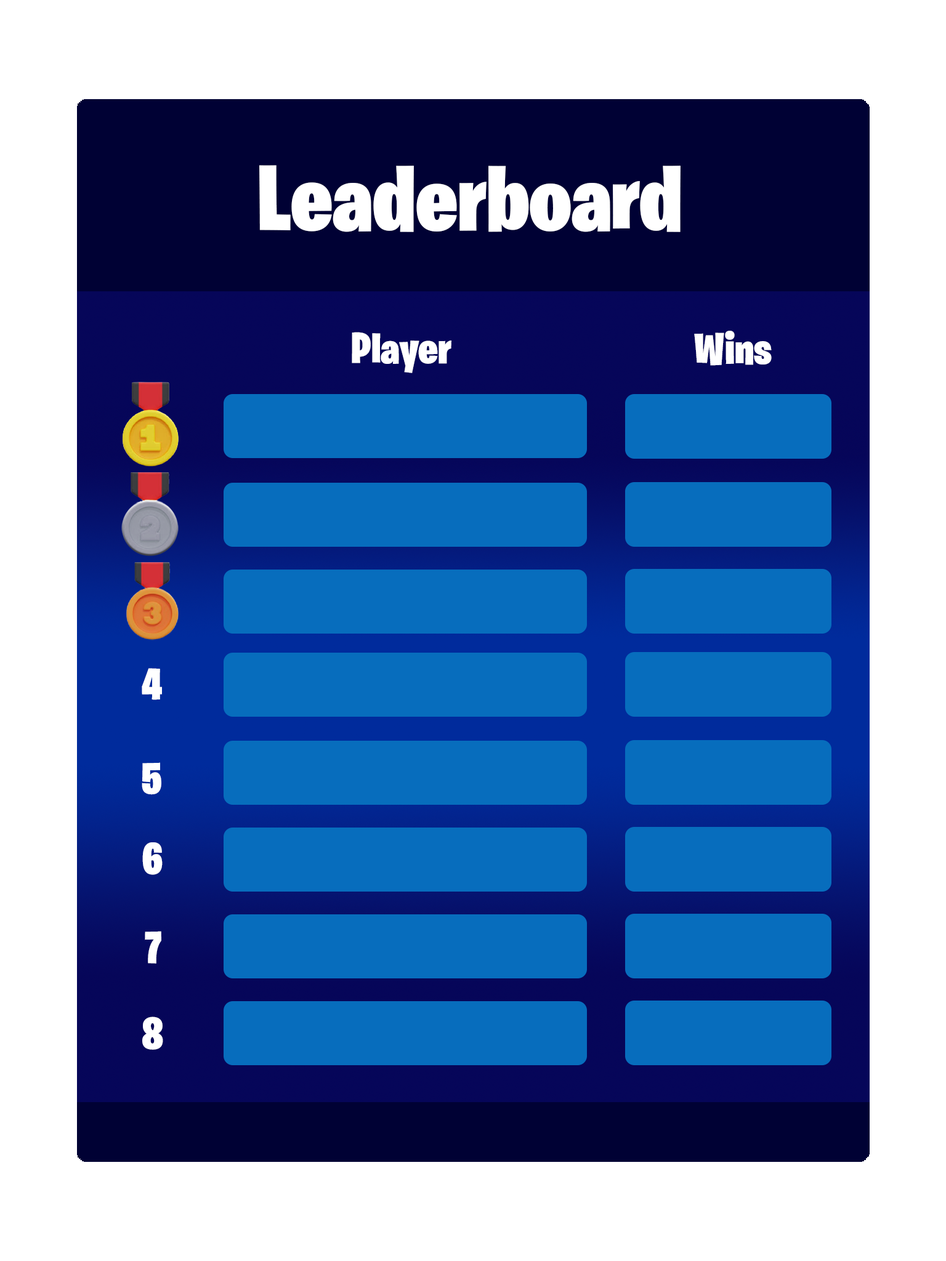
<style>
.page{position:relative;width:946px;height:1261px;background:#ffffff}
.page>*{position:absolute;margin:0}
.t1{font:94.2px "BurbankBigCondensed-Black";color:#ffffff}
.t2{font:44.3px "BurbankBigCondensed-Black";color:#ffffff}
</style>
<div class="page">
<p class="t1" style="left:259px;top:165px;width:421px;height:67px">Leaderboard</p>
<p class="t2" style="left:352px;top:332px;width:99px;height:41px">Player</p>
<p class="t2" style="left:694px;top:331px;width:77px;height:35px">Wins</p>
<p class="t2" style="left:142px;top:668px;width:20px;height:32px">4</p>
<p class="t2" style="left:142px;top:762px;width:19px;height:33px">5</p>
<p class="t2" style="left:142px;top:842px;width:21px;height:33px">6</p>
<p class="t2" style="left:145px;top:931px;width:16px;height:33px">7</p>
<p class="t2" style="left:142px;top:1016px;width:21px;height:34px">8</p>
</div>
